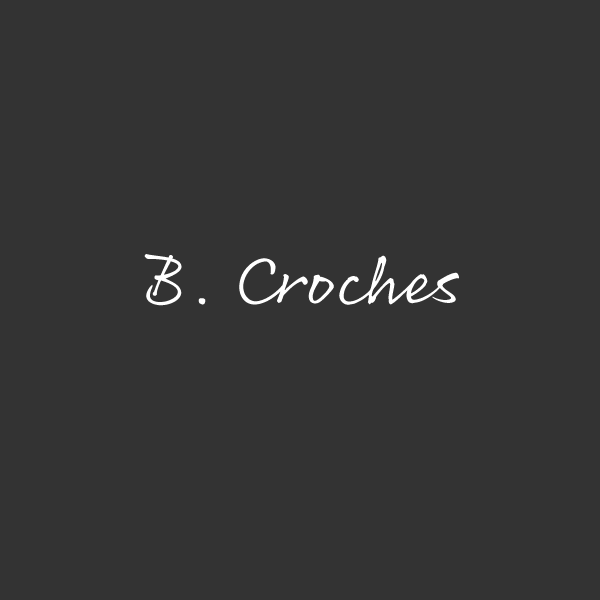
<style>
.page{position:relative;width:600px;height:600px;background:#333333}
.page>*{position:absolute;margin:0}
.t1{font:74.9px "Rollerscript-Smooth";color:#ffffff}
</style>
<div class="page">
<p class="t1" style="left:144px;top:254px;width:315px;height:52px">B. Croches</p>
</div>
